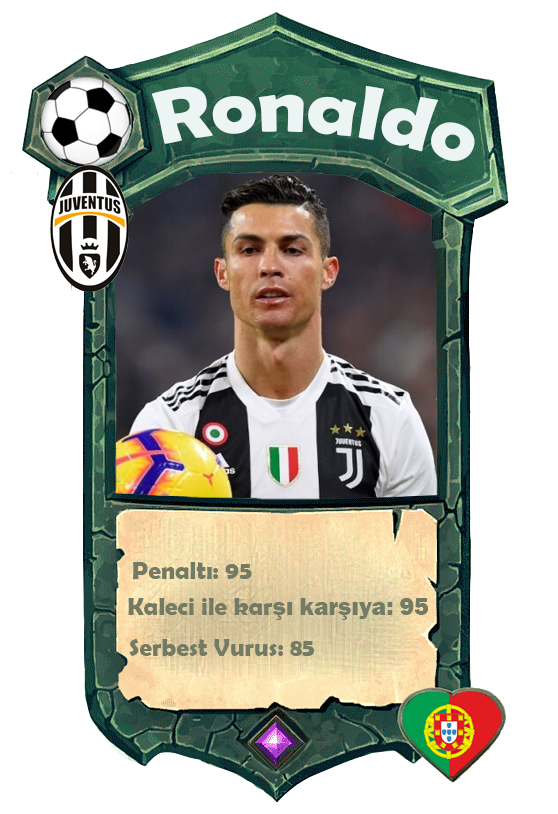
<style>
.page{position:relative;width:558px;height:814px;background:#ffffff}
.page>*{position:absolute;margin:0}
.t1{font:75.7px "BerlinSansFBDemi-Bold";color:#ecf4f4;scale:1.06 1}
.t2{font:25px "BerlinSansFBDemi-Bold";color:#747b65}
.t3{font:25px "FranklinGothic-Heavy";color:#747b65}
</style>
<div class="page">
<p class="t1" style="left:151px;top:86px;width:324px;height:75px;rotate:4deg">Ronaldo</p>
<p class="t2" style="left:133px;top:562px;width:119px;height:17px">Penaltı: 95</p>
<p class="t2" style="left:128px;top:598px;width:300px;height:22px">Kaleci ile kar<span class="t3">şı karşıya: 95</span></p>
<p class="t2" style="left:129px;top:639px;width:185px;height:17px">Serbest Vurus: 85</p>
</div>
